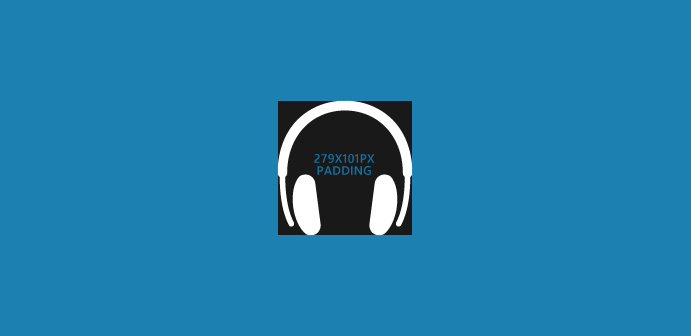
<style>
.page{position:relative;width:691px;height:336px;background:#1c80b0}
.page>*{position:absolute;margin:0}
.t1{font:12px/12px "SegoeWP-Semibold";letter-spacing:0.025em;color:#1372a0;text-transform:uppercase}
</style>
<div class="page">
<p class="t1" style="left:314px;top:154px;width:61px;height:21px;text-align:center">279x101px<br>padding</p>
</div>
